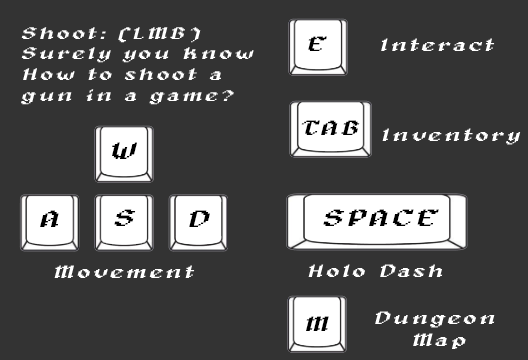
<style>
.page{position:relative;width:528px;height:360px;background:#333333}
.page>*{position:absolute;margin:0}
.t1{font:17.3px "Alagard";letter-spacing:0.1em;color:#ffffff;font-style:italic;scale:1.46 1}
.t2{font:21px "Alagard";letter-spacing:0.1em;color:#000000;font-style:italic;scale:1.45 1}
.t3{font:18px "Alagard";letter-spacing:0.1em;color:#ffffff;font-style:italic;scale:1.45 1}
.t4{font:24px "Alagard";letter-spacing:0.1em;color:#000000;font-style:italic;scale:1.45 1}
</style>
<div class="page">
<p class="t1" style="left:21px;top:27px;width:233px;height:78px">Shoot: (LMB) <br>Surely you know<br>How to shoot a <br>gun in a game?</p>
<p class="t2" style="left:308px;top:36px;width:19px;height:15px">E</p>
<p class="t3" style="left:381px;top:38px;width:114px;height:13px">Interact</p>
<p class="t2" style="left:301px;top:120px;width:59px;height:15px">TAB</p>
<p class="t3" style="left:382px;top:128px;width:139px;height:17px">Inventory</p>
<p class="t4" style="left:112px;top:142px;width:25px;height:17px">W</p>
<p class="t4" style="left:114px;top:209px;width:22px;height:17px">S</p>
<p class="t4" style="left:323px;top:209px;width:116px;height:17px">SPACE</p>
<p class="t4" style="left:40px;top:210px;width:19px;height:17px">A</p>
<p class="t4" style="left:189px;top:210px;width:21px;height:17px">D</p>
<p class="t3" style="left:54px;top:265px;width:141px;height:13px">Movement</p>
<p class="t3" style="left:308px;top:264px;width:135px;height:13px">Holo Dash</p>
<p class="t2" style="left:306px;top:316px;width:23px;height:15px">M</p>
<p class="t3" style="left:375px;top:311px;width:120px;height:38px;text-align:center">Dungeon <br>Map</p>
</div>
